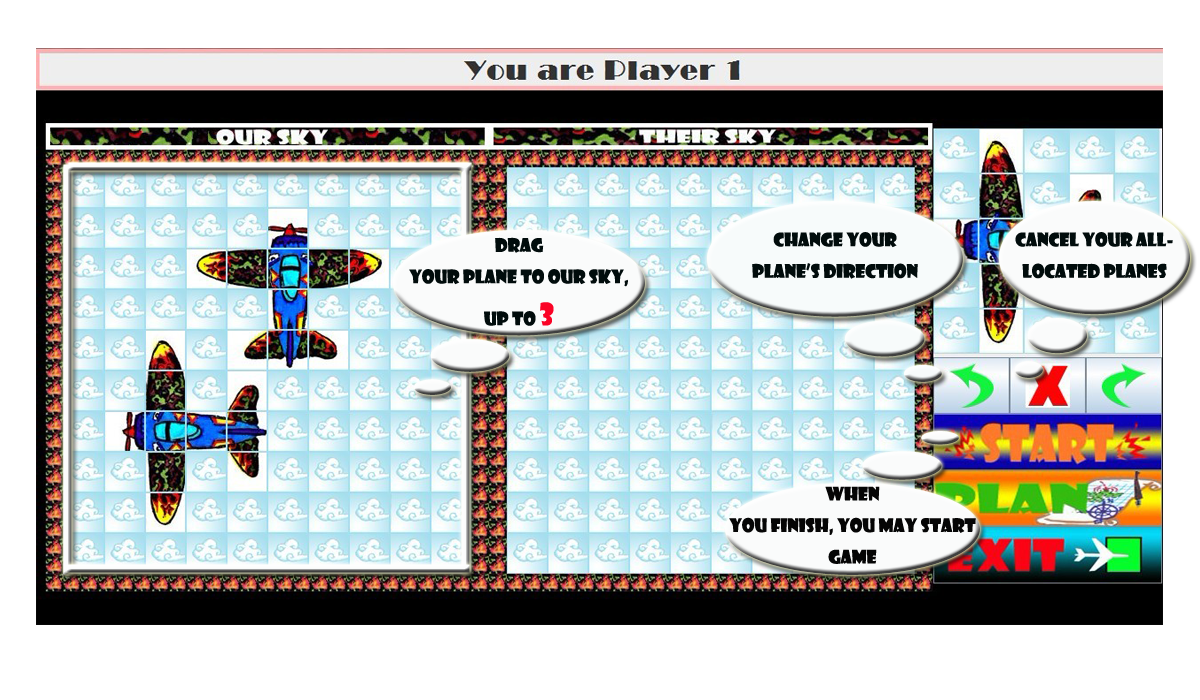
<style>
.page{position:relative;width:1200px;height:700px;background:#ffffff}
.page>*{position:absolute;margin:0}
.t1{font:18px "ShowcardGothic-Reg";color:#010c0c}
.t2{font:30px "ShowcardGothic-Reg";color:#fa0326}
.t3{font:18px "ShowcardGothic-Reg";color:#050505}
</style>
<div class="page">
<p class="t1" style="left:752px;top:232px;width:166px;height:47px;text-align:center">Change your <br>plane’s direction</p>
<p class="t1" style="left:1015px;top:232px;width:158px;height:47px;text-align:center">Cancel your alllocated planes</p>
<p class="t1" style="left:409px;top:237px;width:219px;height:89px;text-align:center">drag your plane to our sky, up to <span class="t2">3</span></p>
<p class="t3" style="left:729px;top:486px;width:247px;height:78px;text-align:center">when you finish, you may start game</p>
</div>
